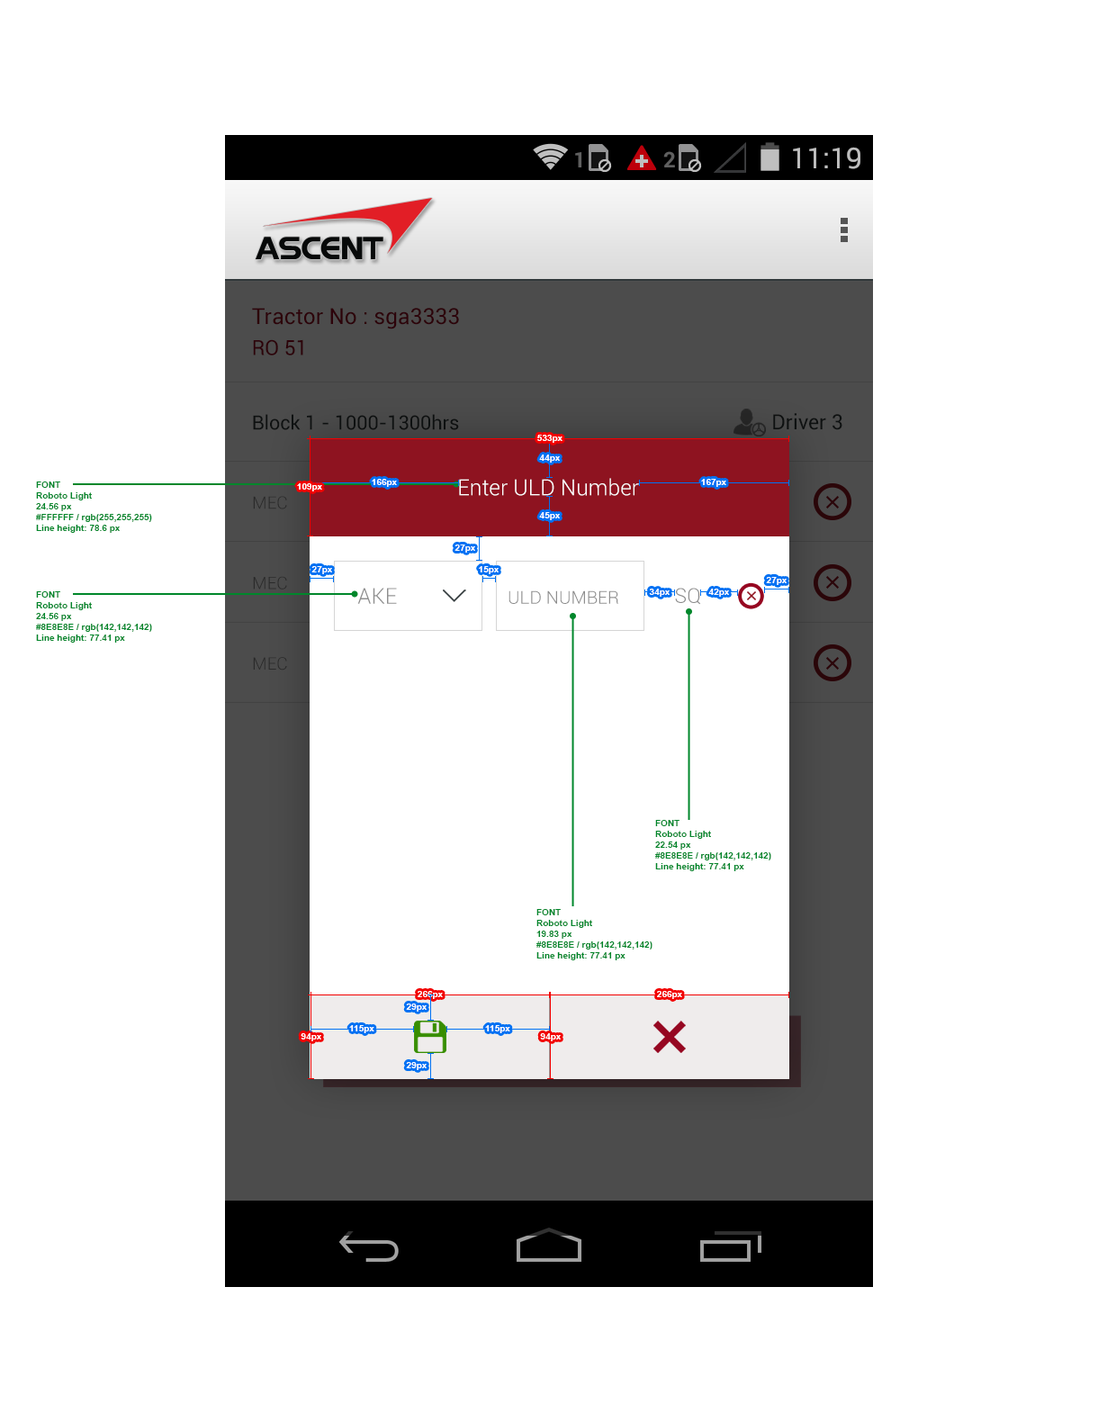
<style>
.page{position:relative;width:1098px;height:1422px;background:#ffffff}
.page>*{position:absolute;margin:0}
.t1{font:22.2px "Roboto-Regular";color:#2d020a}
.t2{font:20.7px "Roboto-Regular";color:#2d020a}
.t3{font:19.5px "Roboto-Regular";color:#0d1010}
.t4{font:20.7px "Roboto-Regular";color:#0e1111}
.t5{font:9px "Arial-BoldMT";color:#ffffff}
.t6{font:9px "Arial-BoldMT";color:#00872b}
.t7{font:22.1px "Roboto-Light";color:#ffffff}
.t8{font:17.1px "Roboto-Light";color:#2a2a2a}
.t9{font:22.1px "Roboto-Light";color:#8e8e8e}
.t10{font:17.8px "Roboto-Light";color:#8e8e8e}
.t11{font:20.3px "Roboto-Light";color:#8e8e8e}
</style>
<div class="page">
<p class="t1" style="left:252px;top:308px;width:207px;height:21px">Tractor No : sga3333</p>
<p class="t2" style="left:253px;top:339px;width:50px;height:17px">RO 51</p>
<p class="t3" style="left:253px;top:414px;width:206px;height:16px">Block 1 - 1000-1300hrs</p>
<p class="t4" style="left:773px;top:413px;width:69px;height:17px">Driver 3</p>
<p class="t5" style="left:537px;top:435px;width:25px;height:8px">533px</p>
<p class="t5" style="left:539px;top:454px;width:21px;height:9px">44px</p>
<p class="t6" style="left:36px;top:482px;width:116px;height:51px">FONT <br>Roboto Light<br>24.56 px<br>#FFFFFF / rgb(255,255,255)<br>Line height: 78.6 px</p>
<p class="t5" style="left:297px;top:483px;width:25px;height:8px">109px</p>
<p class="t5" style="left:372px;top:479px;width:25px;height:8px">166px</p>
<p class="t7" style="left:459px;top:478px;width:180px;height:18px">Enter ULD Number</p>
<p class="t5" style="left:701px;top:479px;width:25px;height:8px">167px</p>
<p class="t8" style="left:253px;top:496px;width:34px;height:13px">MEC</p>
<p class="t5" style="left:539px;top:512px;width:21px;height:8px">45px</p>
<p class="t5" style="left:454px;top:544px;width:21px;height:9px">27px</p>
<p class="t5" style="left:311px;top:566px;width:21px;height:8px">27px</p>
<p class="t5" style="left:479px;top:566px;width:20px;height:8px">15px</p>
<p class="t8" style="left:253px;top:576px;width:34px;height:14px">MEC</p>
<p class="t5" style="left:766px;top:577px;width:21px;height:8px">27px</p>
<p class="t6" style="left:36px;top:591px;width:116px;height:52px">FONT <br>Roboto Light<br>24.56 px<br>#8E8E8E / rgb(142,142,142)<br>Line height: 77.41 px</p>
<p class="t9" style="left:357px;top:588px;width:40px;height:16px">AKE</p>
<p class="t10" style="left:508px;top:590px;width:110px;height:14px">ULD NUMBER</p>
<p class="t5" style="left:649px;top:589px;width:21px;height:8px">34px</p>
<p class="t11" style="left:675px;top:588px;width:25px;height:17px">SQ</p>
<p class="t5" style="left:708px;top:589px;width:21px;height:8px">42px</p>
<p class="t8" style="left:253px;top:657px;width:34px;height:13px">MEC</p>
<p class="t6" style="left:655px;top:820px;width:116px;height:51px">FONT <br>Roboto Light<br>22.54 px<br>#8E8E8E / rgb(142,142,142)<br>Line height: 77.41 px</p>
<p class="t6" style="left:536px;top:909px;width:116px;height:51px">FONT <br>Roboto Light<br>19.83 px<br>#8E8E8E / rgb(142,142,142)<br>Line height: 77.41 px</p>
<p class="t5" style="left:418px;top:991px;width:25px;height:8px">266px</p>
<p class="t5" style="left:657px;top:991px;width:25px;height:8px">266px</p>
<p class="t5" style="left:406px;top:1004px;width:21px;height:8px">29px</p>
<p class="t5" style="left:349px;top:1025px;width:25px;height:8px">115px</p>
<p class="t5" style="left:485px;top:1025px;width:25px;height:8px">115px</p>
<p class="t5" style="left:301px;top:1033px;width:20px;height:8px">94px</p>
<p class="t5" style="left:540px;top:1033px;width:21px;height:8px">94px</p>
<p class="t5" style="left:406px;top:1062px;width:21px;height:8px">29px</p>
</div>
